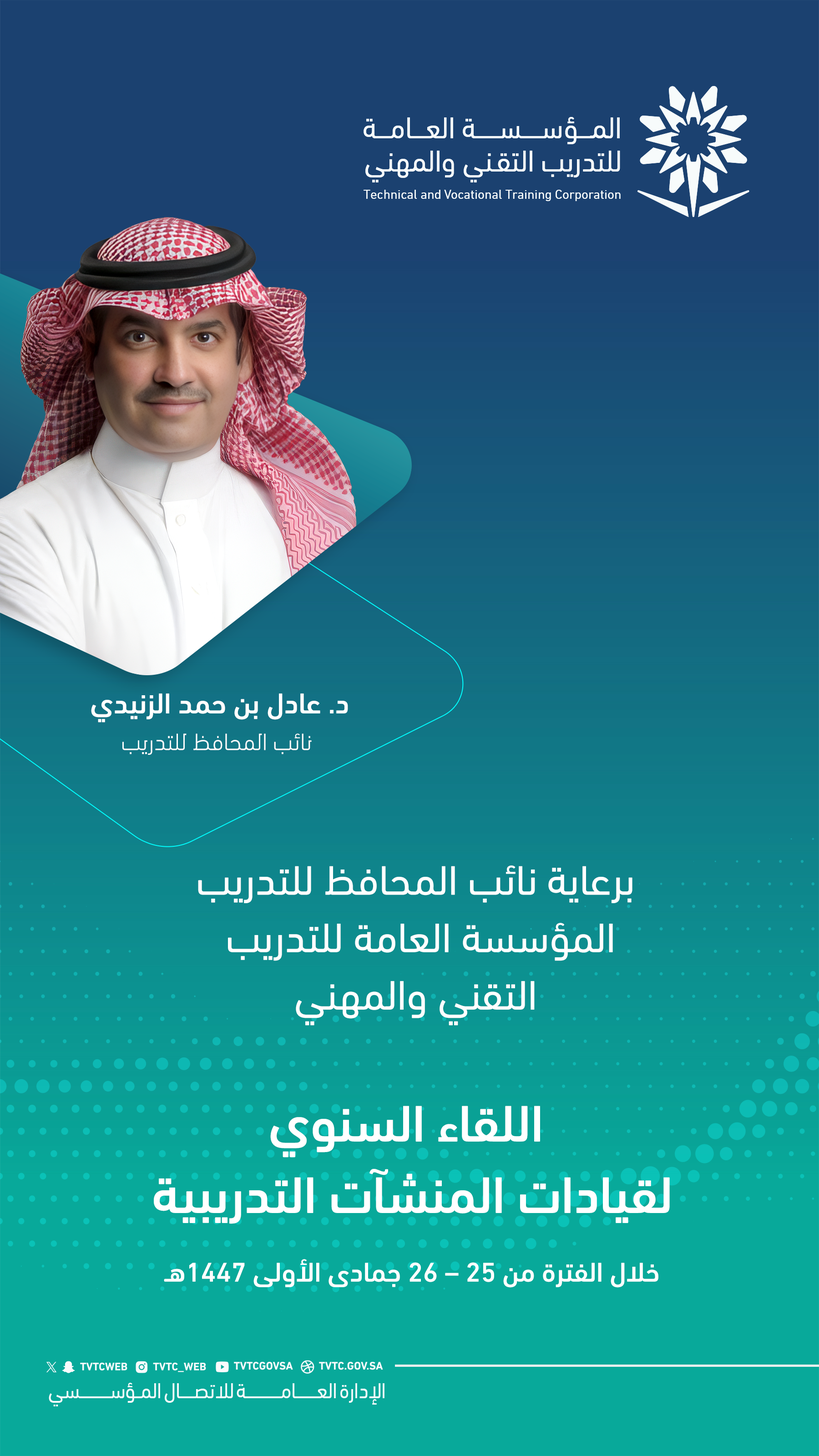
<style>
.page{position:relative;width:819px;height:1456px}
.page>*{position:absolute;margin:0}
.t1{font:29.2px "DINNextLTArabic-Medium";color:#ffffff}
.t2{font:24.1px "ntaqat";color:#ffffff}
.t3{font:42px/32.7px "DINNextLTArabic-Regular";color:#ffffff}
.t4{font:52.2px/40.6px "DINNextLTArabic-Medium";color:#ffffff}
.t5{font:27.6px "DINNextLTArabic-Medium";color:#ffffff}
</style>
<div class="page">
<p class="t1" style="left:91px;top:693px;width:257px;height:30px">د. عادل بن حمد الزنيدي</p>
<p class="t2" style="left:122px;top:733px;width:190px;height:22px">نائب المحافظ للتدريب</p>
<p class="t3" style="left:198px;top:865px;width:434px;height:161px;text-align:center">برعاية نائب المحافظ للتدريب<br>المؤسسة العامة للتدريب <br>التقني والمهني</p>
<p class="t4" style="left:154px;top:1106px;width:516px;height:118px;text-align:center">اللقاء السنوي <br>لقيادات المنشآت التدريبية</p>
<p class="t5" style="left:164px;top:1259px;width:494px;height:29px">خلال الفترة من 25 – 26 جمادى الأولى 1447هـ</p>
</div>
